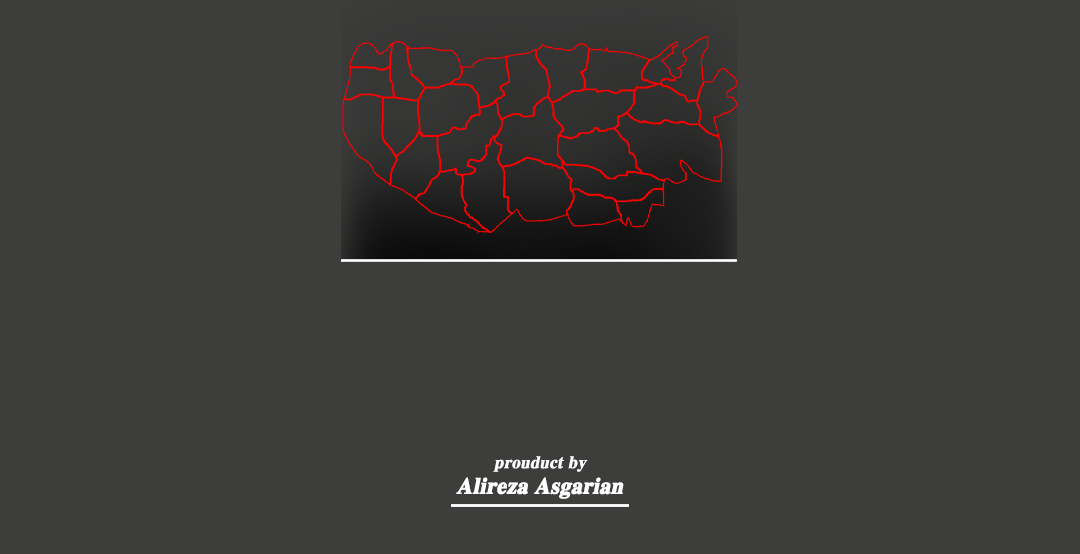
<style>
.page{position:relative;width:1080px;height:554px;background:#3d3d3c}
.page>*{position:absolute;margin:0}
.t1{font:27px/25.5px "IRFarnaz";color:#ffffff;font-weight:bold;scale:0.95 1}
.t2{font:20.7px/25.5px "IRFarnaz";color:#ffffff;font-weight:bold;scale:0.95 1}
</style>
<div class="page">
<p class="t1" style="left:456px;top:456px;width:168px;height:43px;text-align:center"><span class="t2">prouduct by<br></span>Alireza Asgarian</p>
</div>
